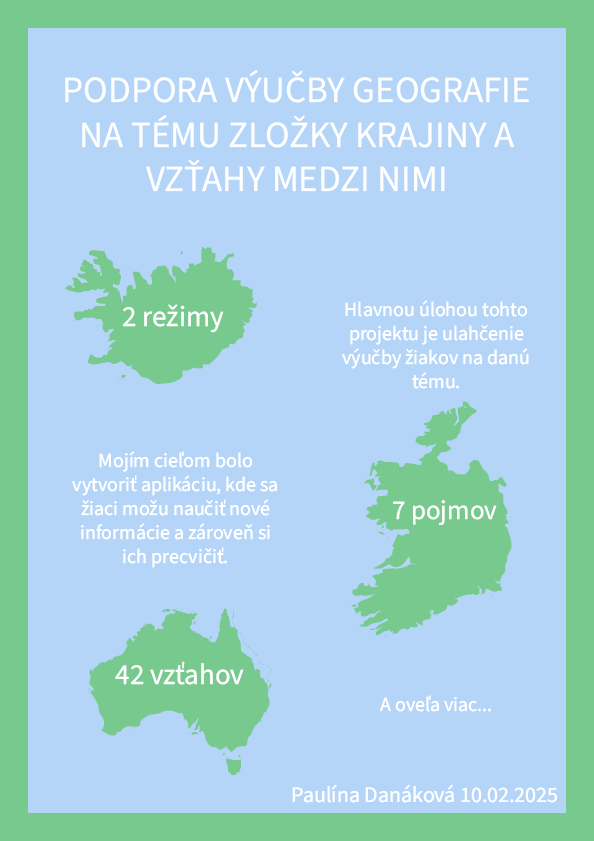
<style>
.page{position:relative;width:594px;height:841px;background:#b4d5f8}
.page>*{position:absolute;margin:0}
.t1{font:37px "SourceSansRoman-Regular";color:#ffffff}
.t2{font:47px "GeoBats";color:#78c98e}
.t3{font:29px "SourceSansRoman-Regular";color:#ffffff}
.t4{font:20px "SourceSansRoman-Regular";color:#ffffff}
.t5{font:60px "GeoBats";color:#78c98e}
.t6{font:27px "SourceSansRoman-Regular";color:#ffffff}
.t7{font:45px "GeoBats";color:#78c98e}
.t8{font:22px "SourceSansRoman-Regular";color:#ffffff}
</style>
<div class="page">
<p class="t1" style="left:65px;top:70px;width:464px;height:122px;text-align:center">PODPORA VÝUČBY GEOGRAFIE NA TÉMU ZLOŽKY KRAJINY A VZŤAHY MEDZI NIMI</p>
<p class="t2" style="left:65px;top:247px;width:192px;height:137px;text-align:center">h</p>
<p class="t3" style="left:123px;top:304px;width:101px;height:29px">2 režimy</p>
<p class="t4" style="left:342px;top:300px;width:187px;height:89px;text-align:center">Hlavnou úlohou tohto projektu je ulahčenie výučby žiakov na danú tému.</p>
<p class="t5" style="left:351px;top:401px;width:161px;height:235px;text-align:center">i</p>
<p class="t4" style="left:72px;top:451px;width:205px;height:117px;text-align:center">Mojím cieľom bolo vytvoriť aplikáciu, kde sa žiaci možu naučiť nové informácie a zároveň si ich precvičiť.</p>
<p class="t6" style="left:393px;top:500px;width:104px;height:25px">7 pojmov</p>
<p class="t7" style="left:88px;top:607px;width:184px;height:168px;text-align:center">s</p>
<p class="t3" style="left:115px;top:661px;width:129px;height:24px">42 vzťahov</p>
<p class="t4" style="left:380px;top:695px;width:111px;height:17px">A oveľa viac...</p>
<p class="t8" style="left:292px;top:784px;width:266px;height:19px">Paulína Danáková 10.02.2025</p>
</div>
